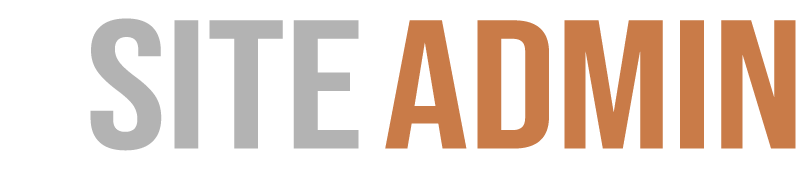
<style>
.page{position:relative;width:800px;height:173px;background:#ffffff}
.page>*{position:absolute;margin:0}
.t1{font:182.9px "BebasNeue-Regular";color:#b3b3b3;scale:1.17 1}
.t2{font:182.9px "BebasNeue-Regular";color:#c97b48;scale:1.17 1}
</style>
<div class="page">
<p class="t1" style="left:90px;top:18px;width:269px;height:133px">SITE</p>
<p class="t2" style="left:385px;top:20px;width:411px;height:129px">ADMIN</p>
</div>
